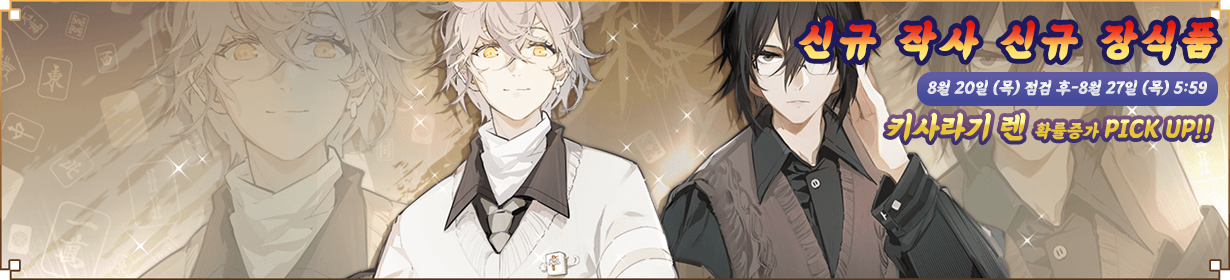
<style>
.page{position:relative;width:1230px;height:280px}
.page>*{position:absolute;margin:0}
.t1{font:42px "BMEULJIROTTF";letter-spacing:0.12em;font-weight:bold;font-style:italic}
.t2{font:17px "BMEULJIROTTF";color:#e4e3ea;font-style:italic}
.t3{font:24.9px "BMEULJIROTTF";font-style:italic}
.t4{font:31px "BMEULJIROTTF";font-style:italic}
.t5{font:18.4px "BMEULJIROTTF";font-style:italic}
</style>
<div class="page">
<p class="t1" style="left:798px;top:20px;width:420px;height:41px">신규 작사 신규 장식품</p>
<p class="t2" style="left:927px;top:79px;width:280px;height:17px">8월 20일 (목) 점검 후-8월 27일 (목) 5:59</p>
<p class="t3" style="left:886px;top:112px;width:325px;height:30px"><span class="t4">키사라기 렌</span><span class="t5">  확률증가 </span>PICK UP!!</p>
</div>
